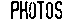
<style>
.page{position:relative;width:80px;height:20px;background:#ffffff}
.page>*{position:absolute;margin:0}
.t1{font:17.8px "TopSecretRegularSWFTE";color:#000000}
</style>
<div class="page">
<p class="t1" style="left:11px;top:1px;width:51px;height:18px">PHoTOS</p>
</div>
